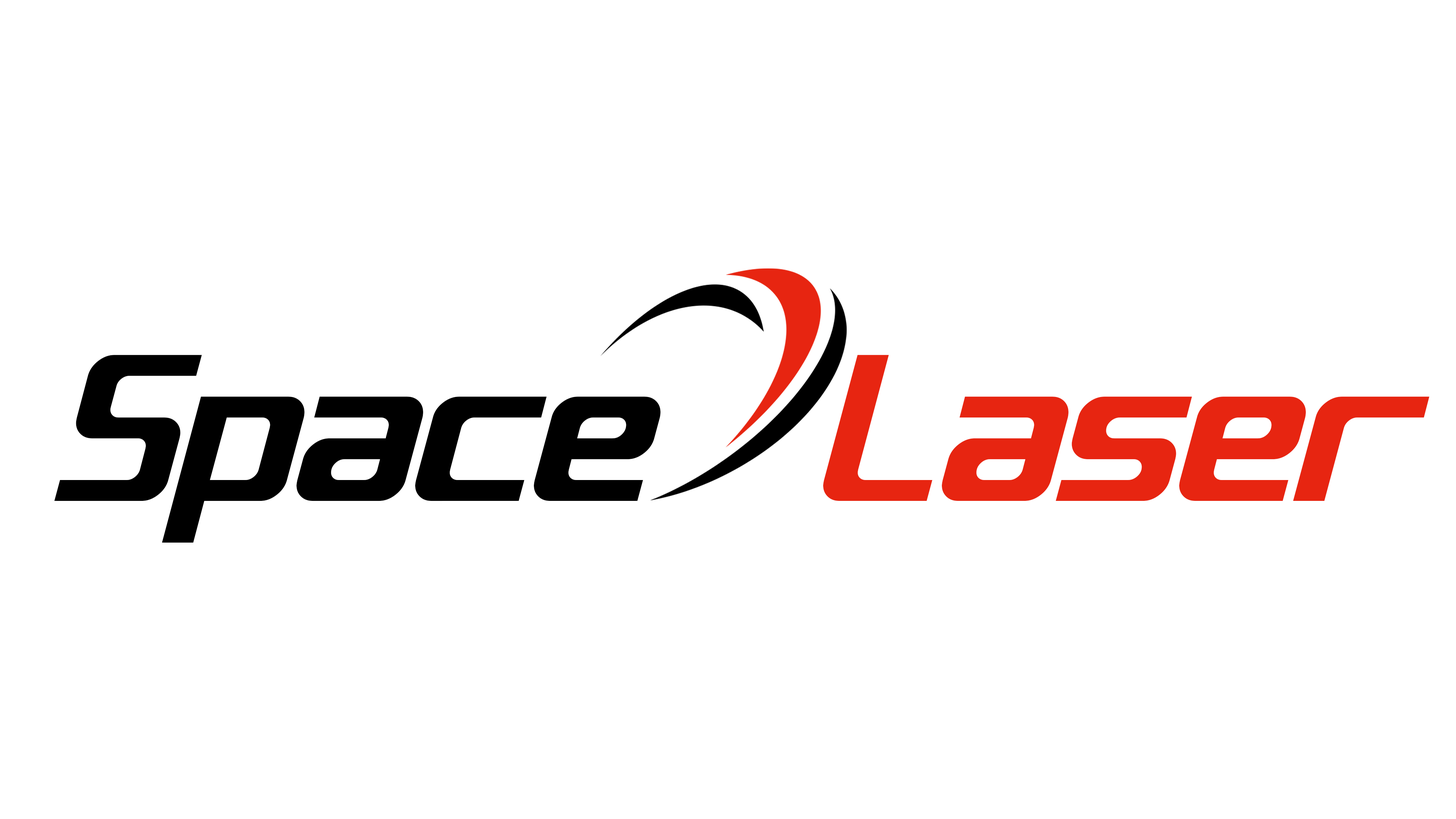
<style>
.page{position:relative;width:1456px;height:819px;background:#ffffff}
.page>*{position:absolute;margin:0}
.t1{font:208.5px "QUUB-Bold_Italic";color:#000000}
.t2{font:208.5px "QUUB-Bold_Italic";color:#e72511}
</style>
<div class="page">
<p class="t1" style="left:54px;top:355px;width:1375px;height:188px">Space <span class="t2">Laser</span></p>
</div>
